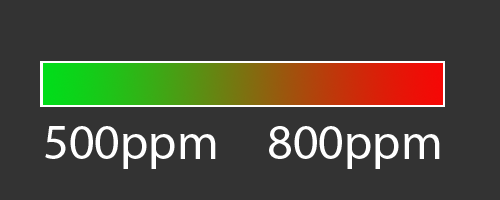
<style>
.page{position:relative;width:500px;height:200px;background:#333333}
.page>*{position:absolute;margin:0}
.t1{font:50px "MyriadPro-Regular";color:#ffffff}
</style>
<div class="page">
<p class="t1" style="left:45px;top:126px;width:171px;height:43px">500ppm</p>
<p class="t1" style="left:269px;top:126px;width:171px;height:43px">800ppm</p>
</div>
